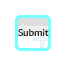
<style>
.page{position:relative;width:64px;height:64px;background:#ffffff}
.page>*{position:absolute;margin:0}
.t1{font:9.6px "AmiraParadiso";color:#333333}
</style>
<div class="page">
<p class="t1" style="left:18px;top:29px;width:31px;height:7px">Submit</p>
</div>
